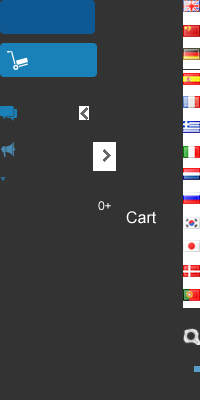
<style>
.page{position:relative;width:200px;height:400px;background:#333333}
.page>*{position:absolute;margin:0}
.t1{font:12px "ArialMT";color:#ffffff}
.t2{font:16px "ArialMT";color:#ffffff}
</style>
<div class="page">
<p class="t1" style="left:98px;top:201px;width:13px;height:9px">0+</p>
<p class="t2" style="left:126px;top:211px;width:30px;height:13px">Cart</p>
</div>
